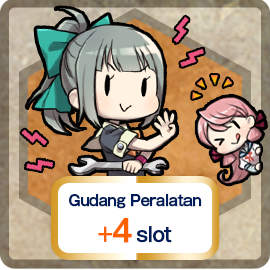
<style>
.page{position:relative;width:270px;height:270px}
.page>*{position:absolute;margin:0}
.t1{font:15px "GothicMB101Pro-Medium";letter-spacing:-0.04em;color:#001d59;font-weight:bold;scale:0.9 1}
.t2{font:20px "GothicMB101Pro-Medium";letter-spacing:-0.04em;color:#ff6000;font-weight:bold;scale:0.9 1}
.t3{font:30px "GothicMB101Pro-Medium";letter-spacing:-0.04em;color:#ff6000;font-weight:bold;scale:0.9 1}
.t4{font:20px "GothicMB101Pro-Medium";letter-spacing:-0.04em;color:#001d59;font-weight:bold;scale:0.9 1}
</style>
<div class="page">
<p class="t1" style="left:69px;top:194px;width:133px;height:49px;text-align:center">Gudang Peralatan<br><span class="t2">+</span><span class="t3">4 </span><span class="t4">slot</span></p>
</div>
